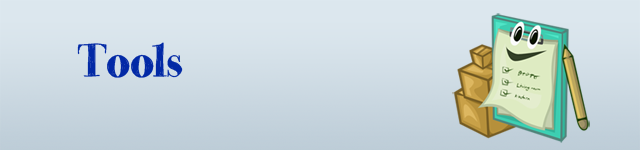
<style>
.page{position:relative;width:640px;height:150px}
.page>*{position:absolute;margin:0}
.t1{font:47.2px "MomsDiner";color:#0229a6}
</style>
<div class="page">
<p class="t1" style="left:77px;top:42px;width:106px;height:36px">Tools</p>
</div>
